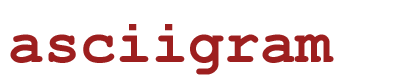
<style>
.page{position:relative;width:400px;height:80px;background:#ffffff}
.page>*{position:absolute;margin:0}
.t1{font:60px "CourierNewPS-BoldMT";color:#9d1f1f}
</style>
<div class="page">
<p class="t1" style="left:10px;top:24px;width:324px;height:51px">asciigram</p>
</div>
